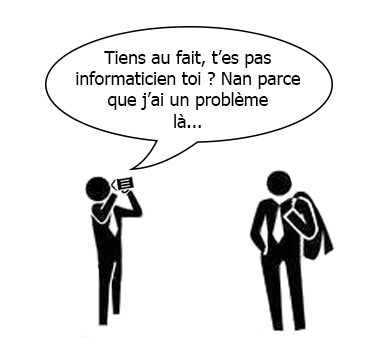
<style>
.page{position:relative;width:369px;height:345px;background:#ffffff}
.page>*{position:absolute;margin:0}
.t1{font:17.7px "Tahoma";color:#000000}
</style>
<div class="page">
<p class="t1" style="left:76px;top:50px;width:225px;height:78px;text-align:center">Tiens au fait, t’es pas <br>informaticien toi ? Nan parce <br>que j’ai un problème<br>là...</p>
</div>
